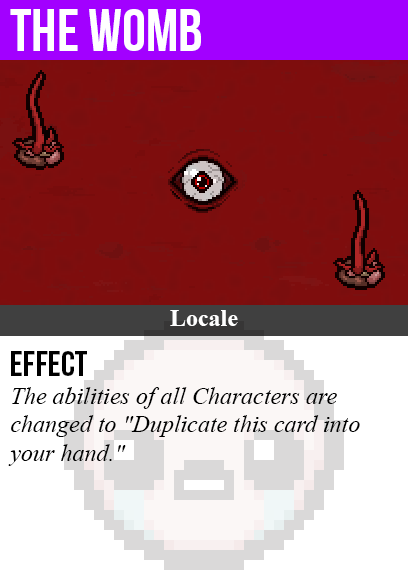
<style>
.page{position:relative;width:408px;height:585px;background:#ffffff}
.page>*{position:absolute;margin:0}
.t1{font:60px "BebasNeue";color:#ffffff}
.t2{font:24px "TimesNewRomanPS-BoldMT";color:#ffffff}
.t3{font:36px "BebasNeue";color:#000000}
.t4{font:24px "TimesNewRomanPS-ItalicMT";color:#000000}
</style>
<div class="page">
<p class="t1" style="left:10px;top:9px;width:191px;height:42px">the womb</p>
<p class="t2" style="left:170px;top:310px;width:68px;height:16px">Locale</p>
<p class="t3" style="left:11px;top:351px;width:76px;height:25px">Effect</p>
<p class="t4" style="left:8px;top:387px;width:352px;height:79px">The abilities of all Characters are<br>changed to "Duplicate this card into<br>your hand."</p>
</div>
